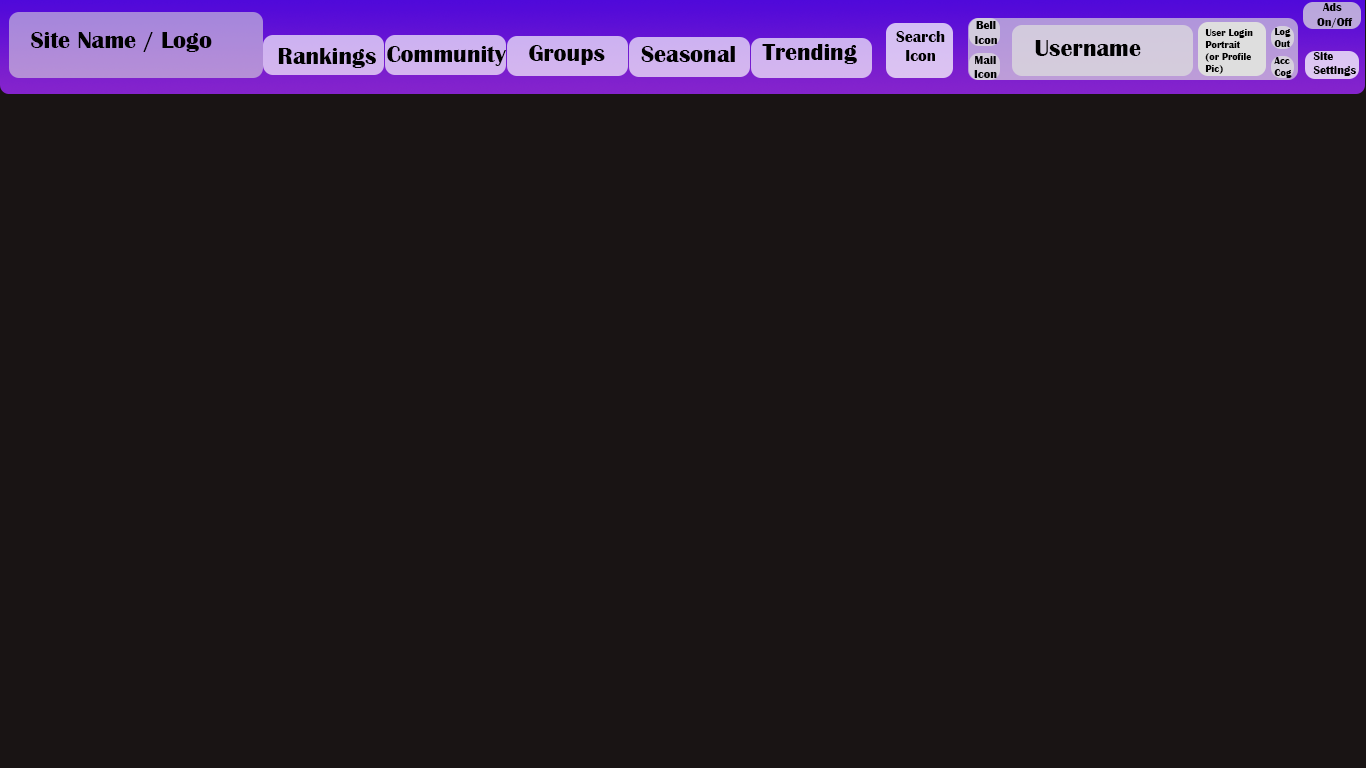
<style>
.page{position:relative;width:1366px;height:768px;background:#191414}
.page>*{position:absolute;margin:0}
.t1{font:12px "BritannicBold";color:#010101}
.t2{font:10px "BritannicBold";color:#010101}
.t3{font:24px "BritannicBold";color:#010101}
.t4{font:16px "BritannicBold";color:#010101}
</style>
<div class="page">
<p class="t1" style="left:1317px;top:3px;width:36px;height:25px">Ads<br>On/Off</p>
<p class="t1" style="left:975px;top:21px;width:22px;height:23px;text-align:center">Bell<br>Icon</p>
<p class="t2" style="left:1205px;top:29px;width:48px;height:45px">User Login<br>Portrait<br>(or Profile<br>Pic)</p>
<p class="t2" style="left:1274px;top:28px;width:17px;height:19px">Log<br>Out</p>
<p class="t3" style="left:31px;top:32px;width:181px;height:20px">Site Name / Logo</p>
<p class="t4" style="left:896px;top:31px;width:49px;height:30px;text-align:center">Search Icon</p>
<p class="t3" style="left:1035px;top:40px;width:106px;height:16px">Username</p>
<p class="t3" style="left:278px;top:47px;width:98px;height:21px">Rankings</p>
<p class="t3" style="left:387px;top:46px;width:120px;height:20px">Community</p>
<p class="t3" style="left:529px;top:45px;width:76px;height:20px">Groups</p>
<p class="t3" style="left:641px;top:46px;width:94px;height:16px">Seasonal</p>
<p class="t3" style="left:762px;top:43px;width:95px;height:21px">Trending</p>
<p class="t1" style="left:1313px;top:52px;width:43px;height:24px">Site<br>Settings</p>
<p class="t1" style="left:974px;top:56px;width:23px;height:22px;text-align:center">Mail<br>Icon</p>
<p class="t2" style="left:1274px;top:57px;width:18px;height:21px">Acc<br>Cog</p>
</div>
